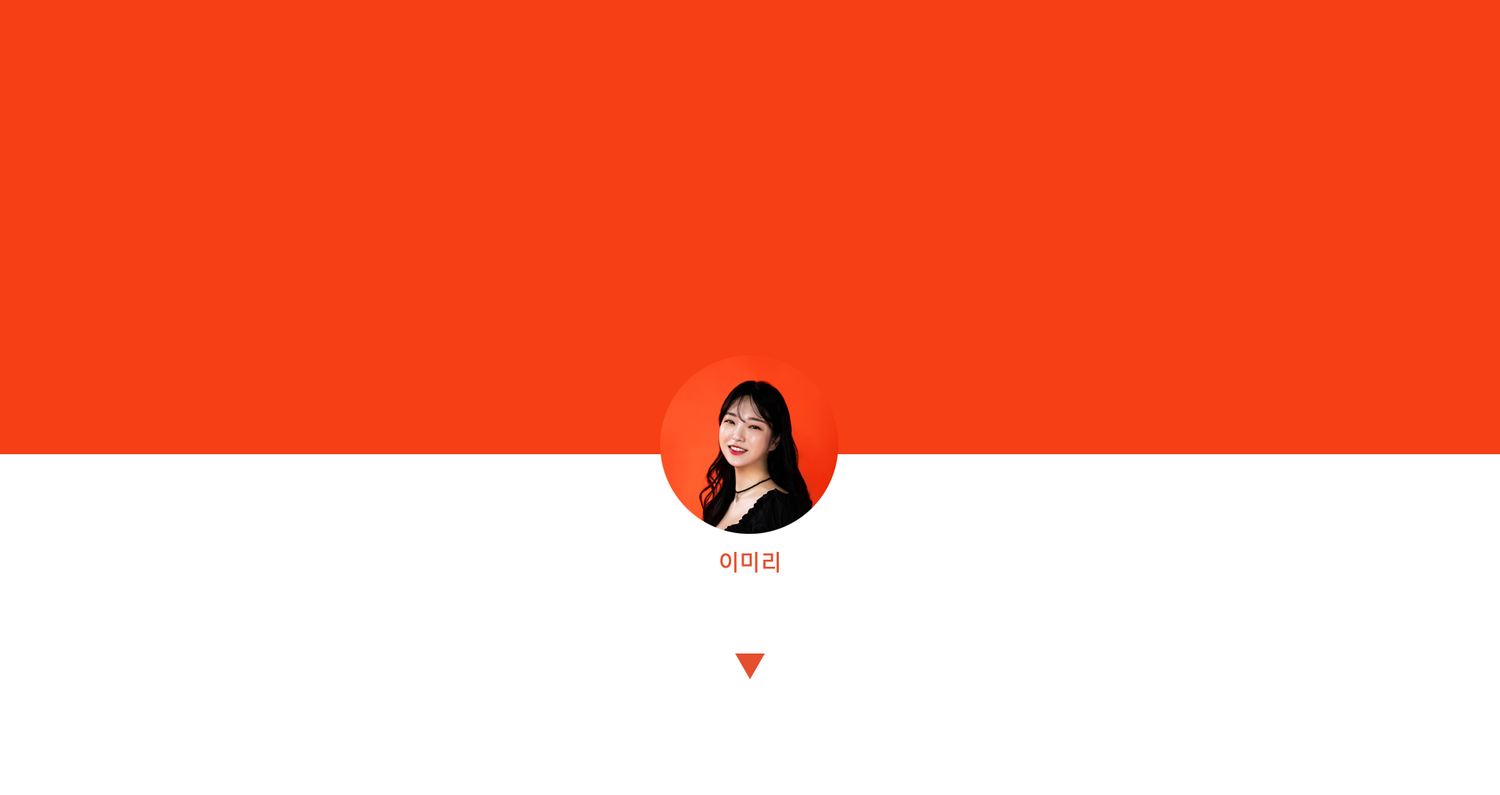
<style>
.page{position:relative;width:1500px;height:795px;background:#f63f14}
.page>*{position:absolute;margin:0}
.t1{font:20.8px "MalgunGothic";color:#e54e2f;font-weight:bold}
</style>
<div class="page">
<p class="t1" style="left:721px;top:552px;width:58px;height:21px">이미리</p>
</div>
